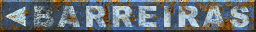
<style>
.page{position:relative;width:256px;height:32px}
.page>*{position:absolute;margin:0}
.t1{font:29.3px "Arial-Black";letter-spacing:0.12em;text-transform:uppercase}
</style>
<div class="page">
<p class="t1" style="left:34px;top:5px;width:216px;height:23px">BARREIRAS</p>
</div>
